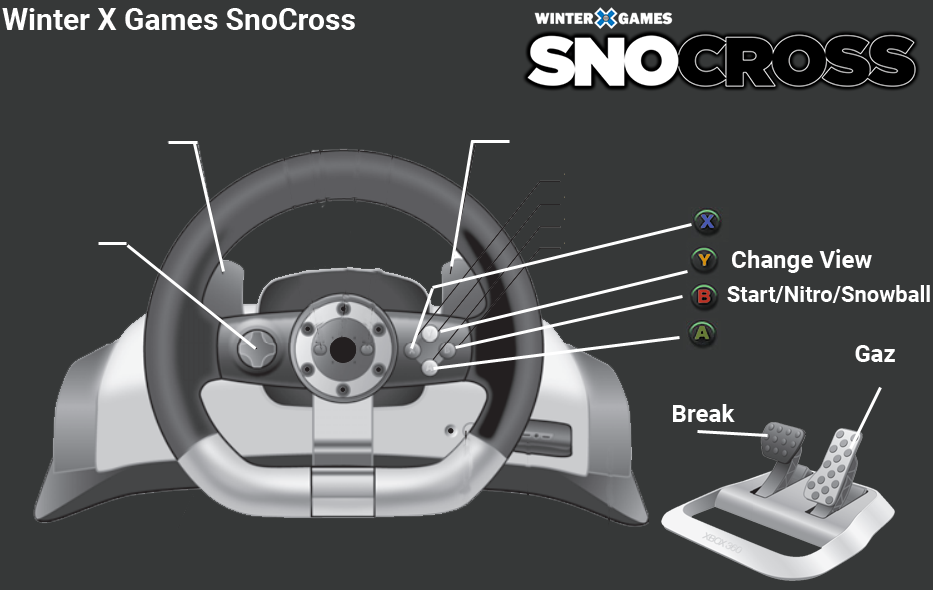
<style>
.page{position:relative;width:933px;height:590px;background:#363838}
.page>*{position:absolute;margin:0}
.t1{font:30px "Roboto-Bold";color:#ffffff}
.t2{font:24px "Roboto-Bold";color:#ffffff}
.t3{font:22px "Roboto-Bold";color:#ffffff}
</style>
<div class="page">
<p class="t1" style="left:2px;top:8px;width:353px;height:22px">Winter X Games SnoCross</p>
<p class="t2" style="left:732px;top:249px;width:140px;height:24px">Change View</p>
<p class="t3" style="left:727px;top:285px;width:203px;height:18px">Start/Nitro/Snowball</p>
<p class="t2" style="left:855px;top:345px;width:40px;height:17px">Gaz</p>
<p class="t2" style="left:673px;top:404px;width:62px;height:18px">Break</p>
</div>
